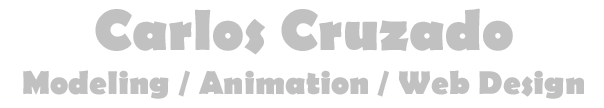
<style>
.page{position:relative;width:604px;height:108px;background:#ffffff}
.page>*{position:absolute;margin:0}
.t1{font:58.3px "BerlinSansFB-Bold";color:#c1c1c1}
.t2{font:33.3px "BerlinSansFB-Bold";color:#c1c1c1}
</style>
<div class="page">
<p class="t1" style="left:95px;top:8px;width:418px;height:47px">Carlos Cruzado</p>
<p class="t2" style="left:23px;top:70px;width:561px;height:29px">Modeling / Animation / Web Design</p>
</div>
